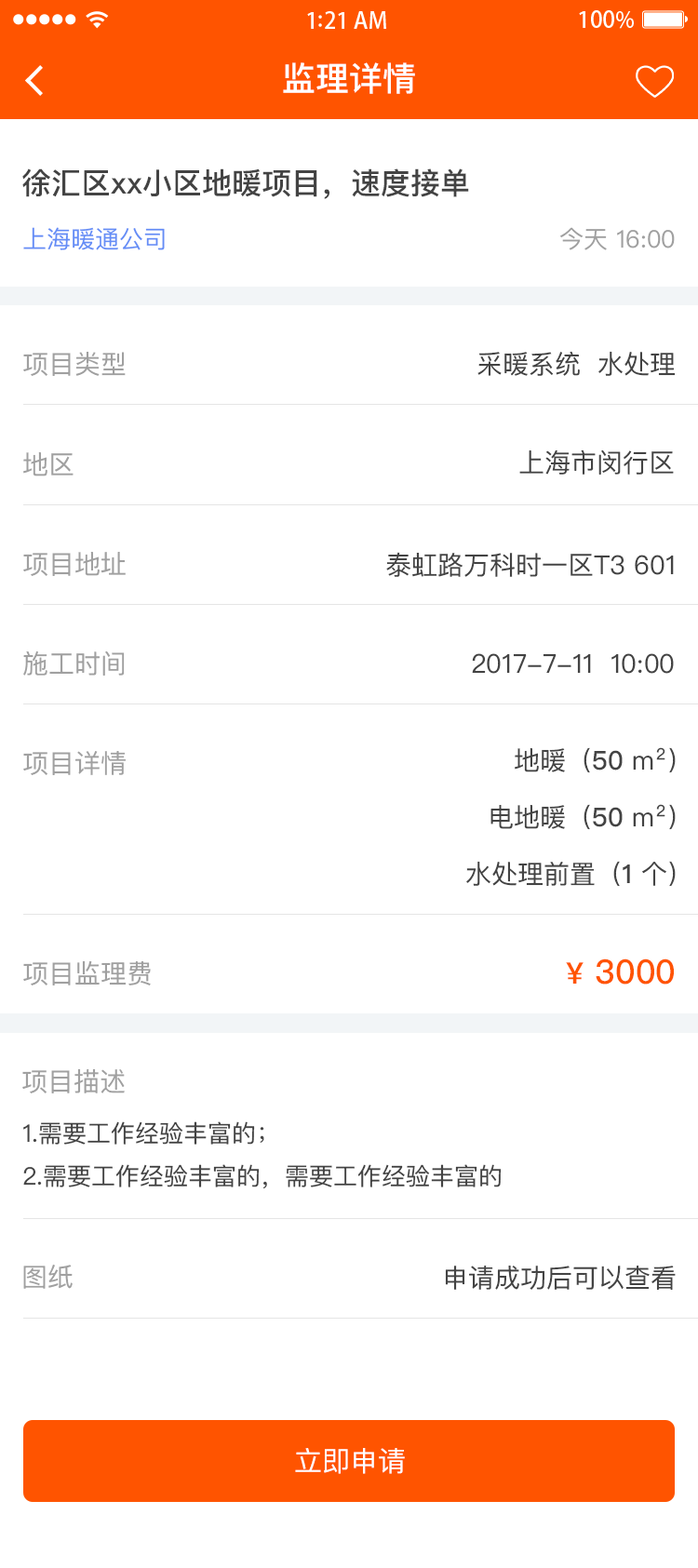
<style>
.page{position:relative;width:698px;height:1568px;background:#ffffff}
.page>*{position:absolute;margin:0}
.t1{font:33.5px "PingFangSC-Medium";color:#ffffff}
.t2{font:29.8px "PingFangSC-Medium";color:#434343}
.t3{font:24.2px "PingFangSC-Regular";color:#648df6}
.t4{font:24.2px "PingFangSC-Regular";color:#a0a0a0}
.t5{font:26.1px "PingFangSC-Regular";color:#a0a0a0}
.t6{font:26.1px "PingFangSC-Regular";color:#434343}
.t7{font:26.1px/60.5px "PingFangSC-Regular";color:#434343}
.t8{font:26.1px/60.5px "PingFangSC-Medium";color:#434343}
.t9{font:33.5px "PingFangSC-Medium";color:#ff5400}
.t10{font:29.8px "PingFangSC-Medium";color:#ff5400}
.t11{font:24.2px/46.5px "PingFangSC-Regular";color:#434343}
.t12{font:27.9px "PingFangSC-Regular";color:#ffffff;text-transform:uppercase}
</style>
<div class="page">
<p class="t1" style="left:283px;top:62px;width:132px;height:32px">监理详情</p>
<p class="t2" style="left:22px;top:168px;width:447px;height:31px">徐汇区xx小区地暖项目，速度接单</p>
<p class="t3" style="left:23px;top:227px;width:142px;height:23px">上海暖通公司</p>
<p class="t4" style="left:560px;top:227px;width:115px;height:23px">今天 16:00</p>
<p class="t5" style="left:23px;top:352px;width:103px;height:24px">项目类型</p>
<p class="t6" style="left:477px;top:351px;width:198px;height:25px">采暖系统  水处理</p>
<p class="t6" style="left:519px;top:449px;width:155px;height:26px">上海市闵行区</p>
<p class="t5" style="left:23px;top:452px;width:51px;height:24px">地区</p>
<p class="t5" style="left:23px;top:552px;width:103px;height:24px">项目地址</p>
<p class="t6" style="left:386px;top:552px;width:288px;height:25px">泰虹路万科时一区T3 601</p>
<p class="t5" style="left:23px;top:650px;width:102px;height:26px">施工时间</p>
<p class="t6" style="left:472px;top:653px;width:202px;height:21px">2017-7-11  10:00</p>
<p class="t7" style="left:466px;top:747px;width:210px;height:140px;text-align:right">地暖（<span class="t8">50 </span>m²）<br>电地暖（<span class="t8">50 </span>m²）<br>水处理前置（<span class="t8">1 </span>个）</p>
<p class="t5" style="left:23px;top:751px;width:103px;height:24px">项目详情</p>
<p class="t5" style="left:23px;top:960px;width:128px;height:25px">项目监理费</p>
<p class="t9" style="left:566px;top:958px;width:108px;height:27px"><span class="t10">¥</span> 3000</p>
<p class="t5" style="left:22px;top:1069px;width:103px;height:24px">项目描述</p>
<p class="t11" style="left:23px;top:1121px;width:479px;height:68px">1.需要工作经验丰富的；<br>2.需要工作经验丰富的，需要工作经验丰富的</p>
<p class="t5" style="left:23px;top:1265px;width:50px;height:24px">图纸</p>
<p class="t6" style="left:445px;top:1266px;width:231px;height:24px">申请成功后可以查看</p>
<p class="t12" style="left:295px;top:1448px;width:110px;height:26px">立即申请</p>
</div>
